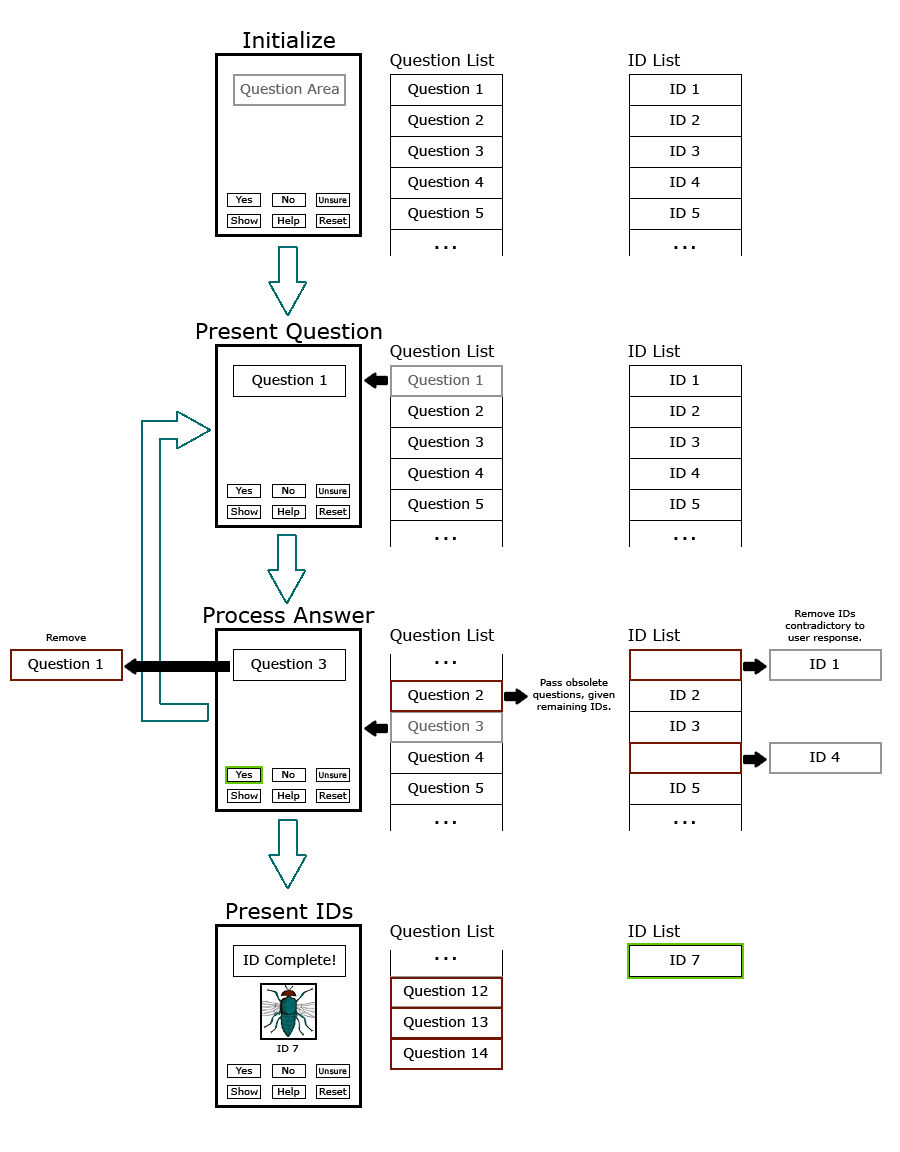
<style>
.page{position:relative;width:900px;height:1152px;background:#ffffff}
.page>*{position:absolute;margin:0}
.t1{font:22px "Verdana";color:#000000}
.t2{font:16px "Verdana";color:#000000}
.t3{font:14px "Verdana";color:#646464}
.t4{font:14px "Verdana";color:#000000}
.t5{font:24px "Verdana";color:#000000}
.t6{font:10px "Verdana";color:#000000}
</style>
<div class="page">
<p class="t1" style="left:243px;top:31px;width:92px;height:17px">Initialize</p>
<p class="t2" style="left:390px;top:54px;width:105px;height:15px">Question List</p>
<p class="t2" style="left:628px;top:54px;width:53px;height:12px">ID List</p>
<p class="t3" style="left:240px;top:84px;width:99px;height:13px">Question Area</p>
<p class="t4" style="left:408px;top:84px;width:75px;height:13px">Question 1</p>
<p class="t4" style="left:670px;top:84px;width:29px;height:10px">ID 1</p>
<p class="t4" style="left:408px;top:115px;width:76px;height:13px">Question 2</p>
<p class="t4" style="left:670px;top:115px;width:30px;height:10px">ID 2</p>
<p class="t4" style="left:408px;top:146px;width:75px;height:13px">Question 3</p>
<p class="t4" style="left:670px;top:146px;width:30px;height:10px">ID 3</p>
<p class="t4" style="left:408px;top:177px;width:76px;height:13px">Question 4</p>
<p class="t4" style="left:670px;top:177px;width:30px;height:10px">ID 4</p>
<p class="t4" style="left:408px;top:208px;width:75px;height:13px">Question 5</p>
<p class="t4" style="left:670px;top:208px;width:30px;height:10px">ID 5</p>
<p class="t5" style="left:435px;top:246px;width:21px;height:3px">...</p>
<p class="t5" style="left:674px;top:246px;width:21px;height:3px">...</p>
<p class="t1" style="left:196px;top:323px;width:186px;height:20px">Present Question</p>
<p class="t2" style="left:390px;top:345px;width:105px;height:15px">Question List</p>
<p class="t2" style="left:628px;top:345px;width:53px;height:12px">ID List</p>
<p class="t4" style="left:252px;top:375px;width:75px;height:13px">Question 1</p>
<p class="t3" style="left:408px;top:375px;width:75px;height:13px">Question 1</p>
<p class="t4" style="left:670px;top:375px;width:29px;height:10px">ID 1</p>
<p class="t4" style="left:408px;top:406px;width:76px;height:13px">Question 2</p>
<p class="t4" style="left:670px;top:406px;width:30px;height:10px">ID 2</p>
<p class="t4" style="left:408px;top:437px;width:75px;height:13px">Question 3</p>
<p class="t4" style="left:670px;top:437px;width:30px;height:10px">ID 3</p>
<p class="t4" style="left:408px;top:468px;width:76px;height:13px">Question 4</p>
<p class="t4" style="left:670px;top:468px;width:30px;height:10px">ID 4</p>
<p class="t4" style="left:408px;top:499px;width:75px;height:13px">Question 5</p>
<p class="t4" style="left:670px;top:499px;width:30px;height:10px">ID 5</p>
<p class="t5" style="left:435px;top:537px;width:21px;height:3px">...</p>
<p class="t5" style="left:674px;top:537px;width:21px;height:3px">...</p>
<p class="t1" style="left:204px;top:607px;width:171px;height:16px">Process Answer</p>
<p class="t6" style="left:785px;top:610px;width:80px;height:33px;text-align:center">Remove IDs<br>contradictory to<br>user response.</p>
<p class="t2" style="left:390px;top:629px;width:105px;height:15px">Question List</p>
<p class="t2" style="left:628px;top:629px;width:53px;height:12px">ID List</p>
<p class="t6" style="left:46px;top:634px;width:40px;height:7px">Remove</p>
<p class="t4" style="left:28px;top:659px;width:75px;height:13px">Question 1</p>
<p class="t4" style="left:251px;top:659px;width:75px;height:13px">Question 3</p>
<p class="t5" style="left:435px;top:661px;width:21px;height:3px">...</p>
<p class="t4" style="left:810px;top:659px;width:29px;height:10px">ID 1</p>
<p class="t6" style="left:533px;top:678px;width:82px;height:34px;text-align:center">Pass obsolete<br>questions, given<br>remaining IDs.</p>
<p class="t4" style="left:408px;top:690px;width:76px;height:13px">Question 2</p>
<p class="t4" style="left:670px;top:690px;width:30px;height:10px">ID 2</p>
<p class="t3" style="left:408px;top:721px;width:75px;height:13px">Question 3</p>
<p class="t4" style="left:670px;top:721px;width:30px;height:10px">ID 3</p>
<p class="t4" style="left:408px;top:752px;width:76px;height:13px">Question 4</p>
<p class="t4" style="left:810px;top:752px;width:30px;height:10px">ID 4</p>
<p class="t4" style="left:408px;top:783px;width:75px;height:13px">Question 5</p>
<p class="t4" style="left:670px;top:783px;width:30px;height:10px">ID 5</p>
<p class="t5" style="left:435px;top:821px;width:21px;height:3px">...</p>
<p class="t5" style="left:674px;top:821px;width:21px;height:3px">...</p>
<p class="t1" style="left:226px;top:903px;width:127px;height:16px">Present IDs</p>
<p class="t2" style="left:390px;top:925px;width:105px;height:15px">Question List</p>
<p class="t2" style="left:628px;top:925px;width:53px;height:12px">ID List</p>
<p class="t4" style="left:243px;top:954px;width:92px;height:14px">ID Complete!</p>
<p class="t5" style="left:435px;top:957px;width:21px;height:3px">...</p>
<p class="t4" style="left:670px;top:955px;width:30px;height:10px">ID 7</p>
<p class="t4" style="left:403px;top:986px;width:85px;height:13px">Question 12</p>
<p class="t4" style="left:403px;top:1017px;width:85px;height:13px">Question 13</p>
<p class="t6" style="left:277px;top:1045px;width:22px;height:7px">ID 7</p>
<p class="t4" style="left:403px;top:1048px;width:85px;height:13px">Question 14</p>
</div>
